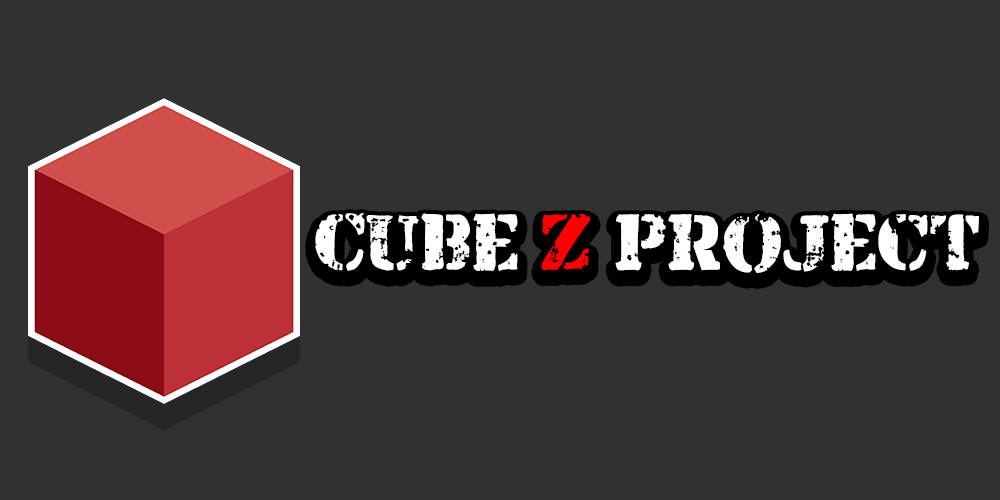
<style>
.page{position:relative;width:1000px;height:500px;background:#313131}
.page>*{position:absolute;margin:0}
.t1{font:82px "ArmaliteRifle";color:#ffffff}
.t2{font:82px "ArmaliteRifle";color:#ff0000}
</style>
<div class="page">
<p class="t1" style="left:315px;top:213px;width:664px;height:60px">Cube <span class="t2">Z</span> Project</p>
</div>
